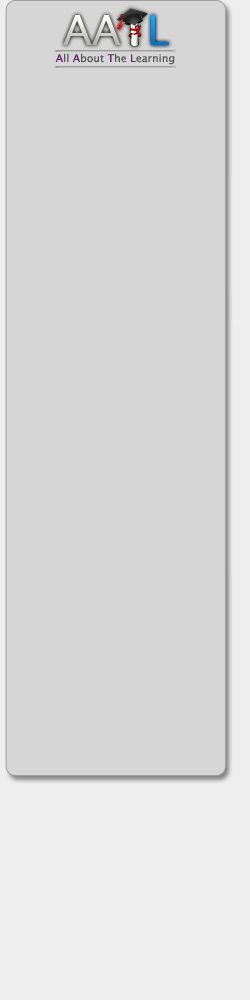
<style>
.page{position:relative;width:250px;height:1000px;background:#d6d6d6}
.page>*{position:absolute;margin:0}
.t1{font:10.6px "LucidaSans";letter-spacing:0.006em;color:#575757}
.t2{font:10.6px "LucidaSans";letter-spacing:0.006em;color:#642566}
</style>
<div class="page">
<p class="t1" style="left:55px;top:53px;width:120px;height:12px"><span class="t2">A</span>ll <span class="t2">A</span>bout <span class="t2">T</span>he <span class="t2">L</span>earning</p>
</div>
